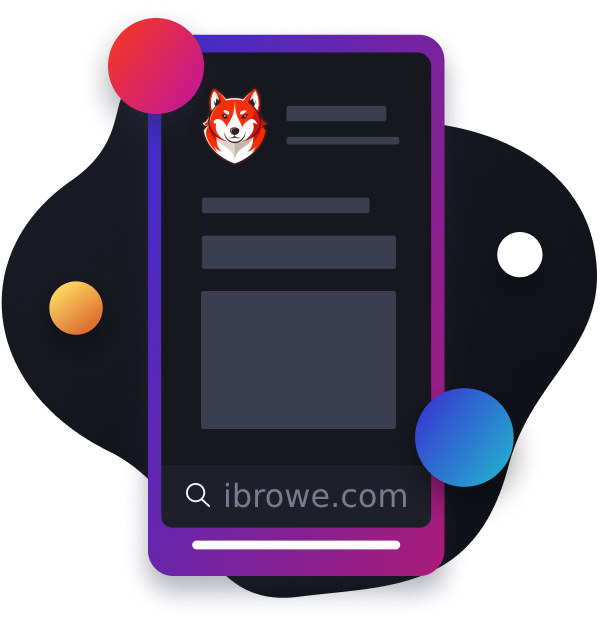
<style>
.page{position:relative;width:600px;height:622px;background:#ffffff}
.page>*{position:absolute;margin:0}
.t1{font:32px "DejaVuSans";color:#777b8e}
</style>
<div class="page">
<p class="t1" style="left:226px;top:482px;width:180px;height:26px">ibrowe.com</p>
</div>
